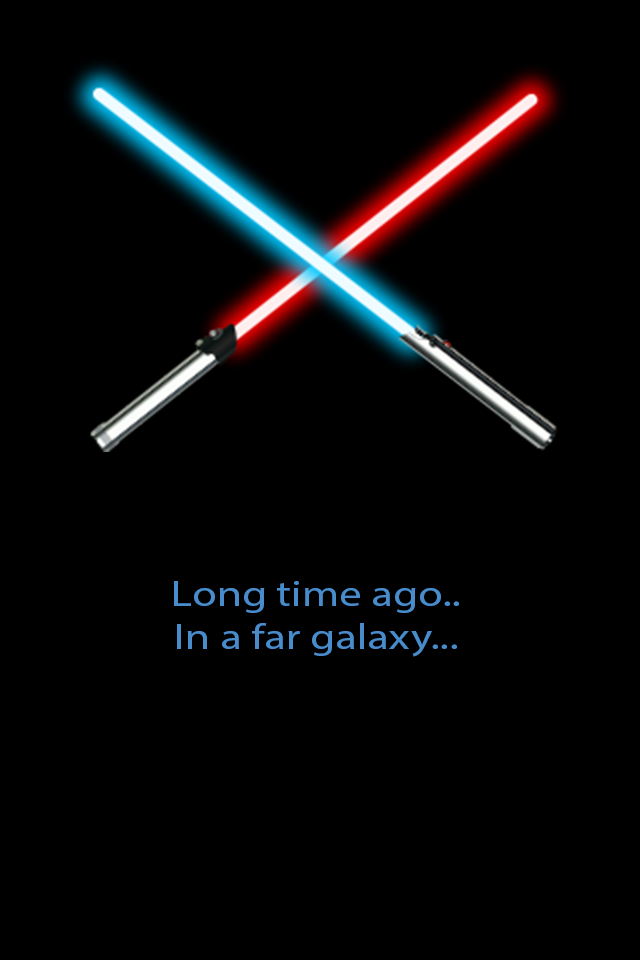
<style>
.page{position:relative;width:640px;height:960px;background:#000000}
.page>*{position:absolute;margin:0}
.t1{font:36px "MyriadPro-Regular";color:#488ccb;scale:1.25 1}
</style>
<div class="page">
<p class="t1" style="left:174px;top:581px;width:285px;height:76px;text-align:center">Long time ago..<br>In a far galaxy...</p>
</div>
